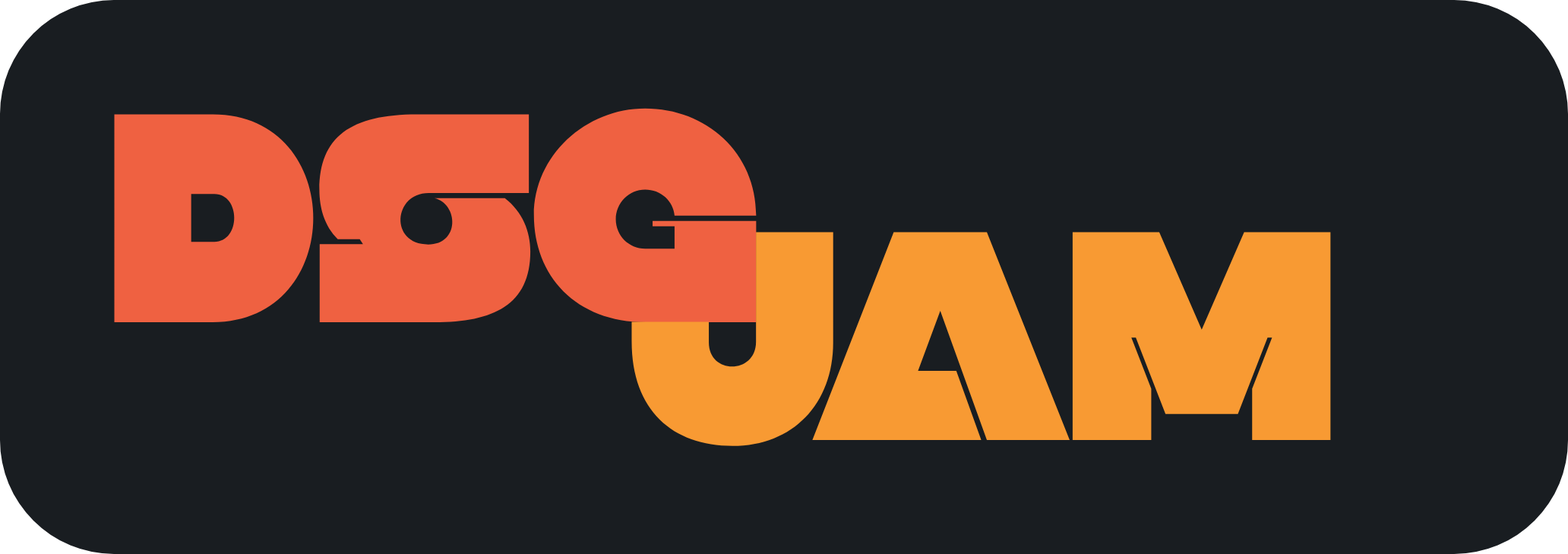
<style>
.page{position:relative;width:1568px;height:554px;background:#191d21}
.page>*{position:absolute;margin:0}
.t1{font:296.7px "Null-Normal";color:#ef6141}
.t2{font:296.7px "Null-Normal";color:#f89a33}
</style>
<div class="page">
<p class="t1" style="left:114px;top:108px;width:643px;height:214px">DSG</p>
<p class="t2" style="left:631px;top:232px;width:700px;height:214px">JAM</p>
</div>
